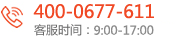
<style>
.page{position:relative;width:181px;height:36px;background:#ffffff}
.page>*{position:absolute;margin:0}
.t1{font:18px "MicrosoftYaHei";color:#f04824}
.t2{font:12px "MicrosoftYaHei";color:#8b8b8b}
</style>
<div class="page">
<p class="t1" style="left:33px;top:4px;width:121px;height:15px">400-0677-611</p>
<p class="t2" style="left:94px;top:25px;width:60px;height:10px">9:00-17:00</p>
</div>
